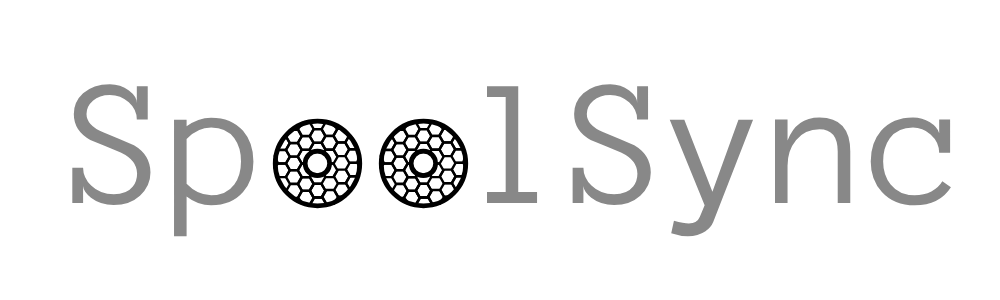
<style>
.page{position:relative;width:1000px;height:300px;background:#ffffff}
.page>*{position:absolute;margin:0}
.t1{font:150px "Anonymous";color:#888888}
</style>
<div class="page">
<p class="t1" style="left:72px;top:84px;width:879px;height:153px">Sp  lSync</p>
</div>
